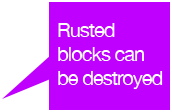
<style>
.page{position:relative;width:172px;height:112px;background:#c000ff}
.page>*{position:absolute;margin:0}
.t1{font:20px "HelveticaNeue";letter-spacing:-0.05em;color:#ffffff}
</style>
<div class="page">
<p class="t1" style="left:58px;top:23px;width:105px;height:66px">Rusted<br>blocks can<br>be destroyed</p>
</div>
